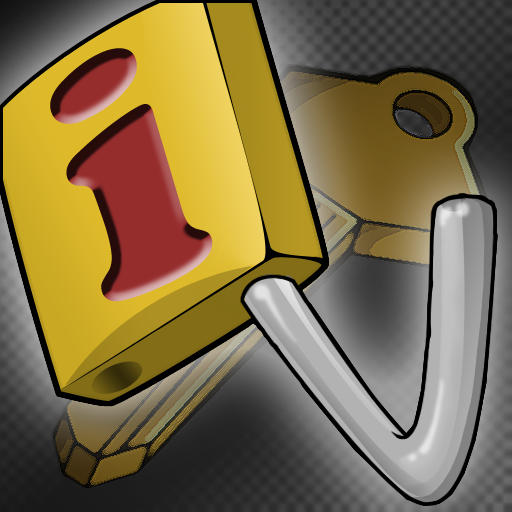
<style>
.page{position:relative;width:512px;height:512px}
.page>*{position:absolute;margin:0}
.t1{font:354.7px "CooperBlack";color:#952c2c}
</style>
<div class="page">
<p class="t1" style="left:50px;top:48px;width:163px;height:254px;rotate:-25deg">i</p>
</div>
